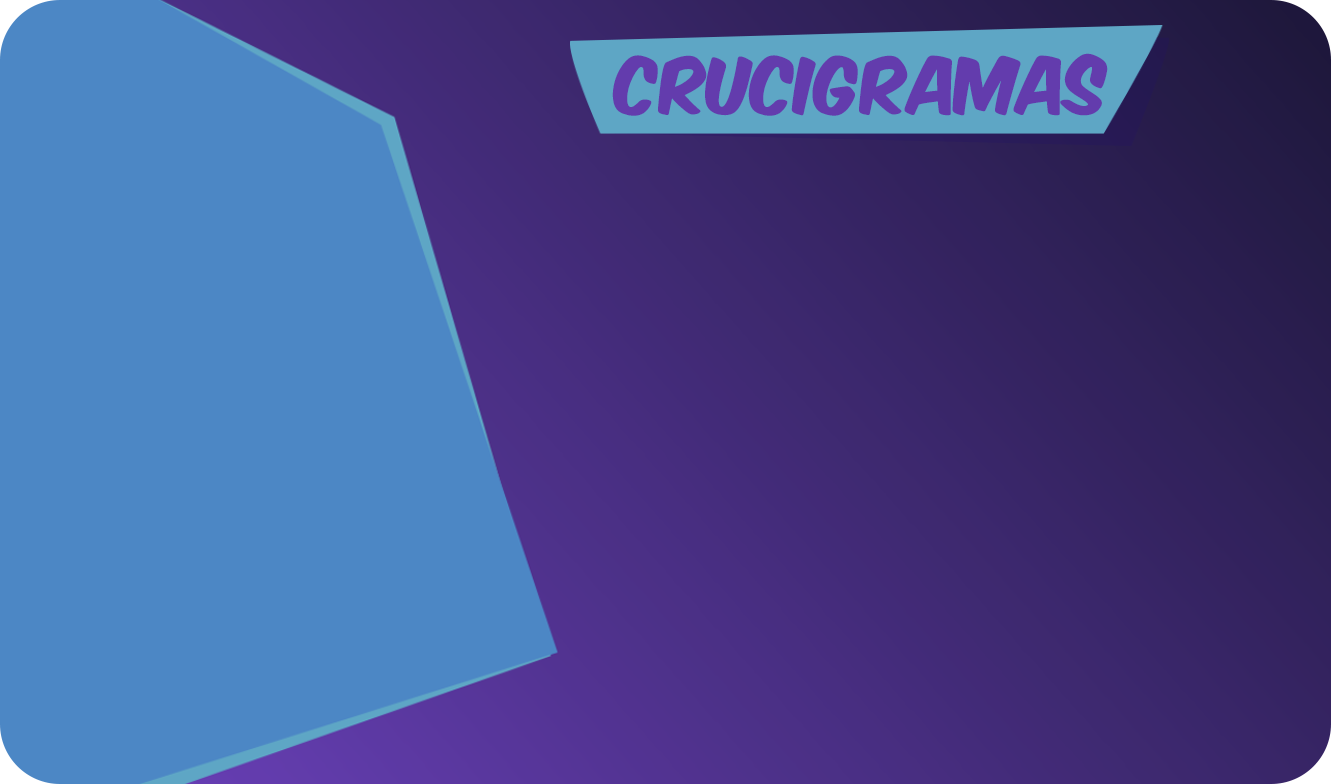
<style>
.page{position:relative;width:1331px;height:784px;background:#4c87c5}
.page>*{position:absolute;margin:0}
.t1{font:66.7px "KomikaAxis";color:#633cad}
</style>
<div class="page">
<p class="t1" style="left:612px;top:53px;width:496px;height:63px">Crucigramas</p>
</div>
